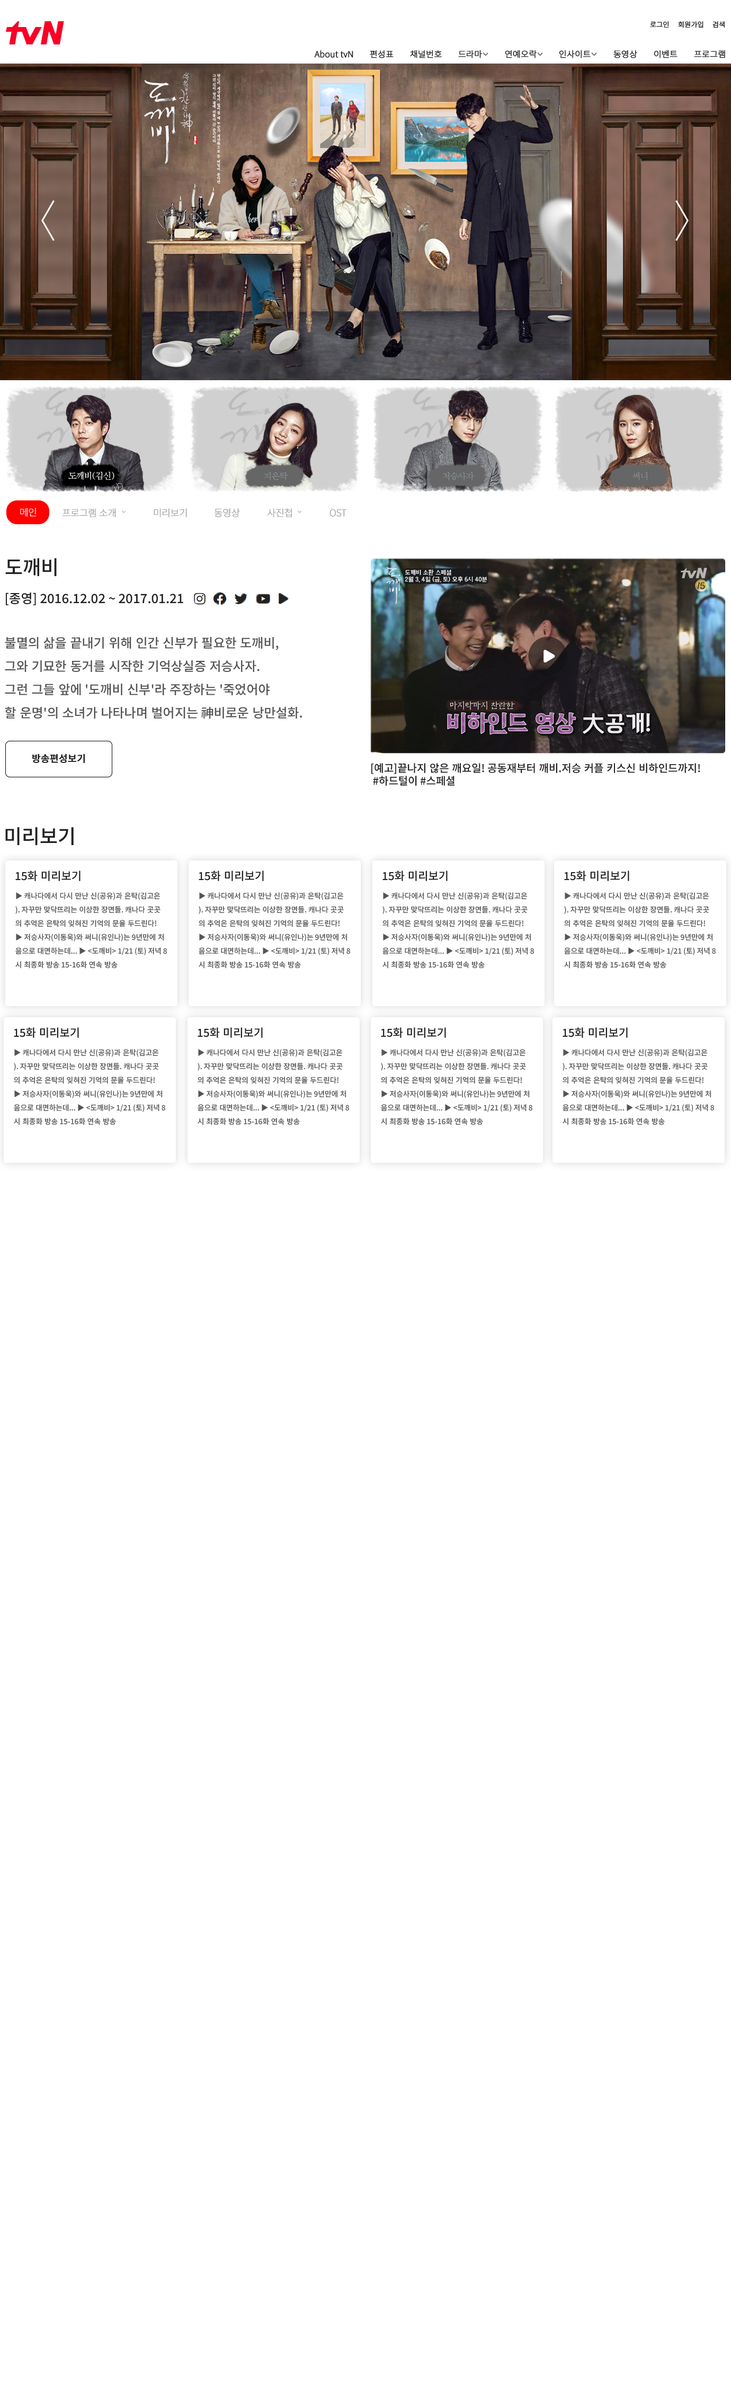
<style>
.page{position:relative;width:731px;height:2386px;background:#ffffff}
.page>*{position:absolute;margin:0}
.t1{font:6.9px "NotoSansKR-Regular";color:#222222;font-weight:bold}
.t2{font:8.5px "NotoSansKR-Regular";color:#222222;font-weight:bold}
.t3{font:9.5px "NotoSansKR-Regular";letter-spacing:-0.04em;color:#fefefe;font-weight:bold}
.t4{font:9.5px "NotoSansKR-Regular";letter-spacing:-0.04em;color:#a19f9c;font-weight:bold}
.t5{font:19.6px "NotoSansKR-Medium";color:#222222}
.t6{font:12.7px "NotoSansKR-Medium";color:#222222}
.t7{font:12.7px/23.3px "NotoSansKR-Medium";color:#555555}
.t8{font:9.5px "NotoSansKR-Regular";color:#222222;font-weight:bold}
.t9{font:10.6px "NotoSansKR-Medium";color:#222222}
.t10{font:11.1px "NotoSansKR-Medium";color:#222222}
.t11{font:7.4px/13.8px "NotoSansKR-Medium";color:#555555}
</style>
<div class="page">
<p class="t1" style="left:650px;top:21px;width:19px;height:7px">로그인</p>
<p class="t1" style="left:678px;top:21px;width:25px;height:7px">회원가입</p>
<p class="t1" style="left:712px;top:21px;width:12px;height:7px">검색</p>
<p class="t2" style="left:314px;top:50px;width:39px;height:8px">About tvN</p>
<p class="t2" style="left:370px;top:50px;width:23px;height:8px">편성표</p>
<p class="t2" style="left:410px;top:50px;width:32px;height:8px">채널번호</p>
<p class="t2" style="left:458px;top:50px;width:24px;height:8px">드라마</p>
<p class="t2" style="left:505px;top:50px;width:31px;height:8px">연예오락</p>
<p class="t2" style="left:559px;top:50px;width:31px;height:8px">인사이트</p>
<p class="t2" style="left:613px;top:50px;width:24px;height:8px">동영상</p>
<p class="t2" style="left:654px;top:50px;width:23px;height:8px">이벤트</p>
<p class="t2" style="left:694px;top:50px;width:31px;height:8px">프로그램</p>
<p class="t3" style="left:20px;top:508px;width:17px;height:9px">메인</p>
<p class="t4" style="left:62px;top:508px;width:54px;height:9px">프로그램 소개</p>
<p class="t4" style="left:154px;top:508px;width:33px;height:9px">미리보기</p>
<p class="t4" style="left:214px;top:508px;width:26px;height:9px">동영상</p>
<p class="t4" style="left:267px;top:508px;width:25px;height:9px">사진첩</p>
<p class="t4" style="left:329px;top:509px;width:18px;height:8px">OST</p>
<p class="t5" style="left:5px;top:558px;width:52px;height:18px">도깨비</p>
<p class="t6" style="left:6px;top:592px;width:177px;height:13px">[종영] 2016.12.02 ~ 2017.01.21</p>
<p class="t7" style="left:5px;top:637px;width:297px;height:81px">불멸의 삶을 끝내기 위해 인간 신부가 필요한 도깨비, <br>그와 기묘한 동거를 시작한 기억상실증 저승사자. <br>그런 그들 앞에 '도깨비 신부'라 주장하는 '죽었어야 <br>할 운명'의 소녀가 나타나며 벌어지는 神비로운 낭만설화.</p>
<p class="t8" style="left:32px;top:753px;width:53px;height:10px">방송편성보기</p>
<p class="t9" style="left:371px;top:763px;width:329px;height:23px">[예고]끝나지 않은 깨요일! 공동재부터 깨비.저승 커플 키스신 비하인드까지!<br> #하드털이 #스페셜</p>
<p class="t5" style="left:5px;top:827px;width:69px;height:18px">미리보기</p>
<p class="t10" style="left:15px;top:870px;width:65px;height:11px">15화 미리보기</p>
<p class="t10" style="left:199px;top:870px;width:65px;height:11px">15화 미리보기</p>
<p class="t10" style="left:382px;top:870px;width:65px;height:11px">15화 미리보기</p>
<p class="t10" style="left:564px;top:870px;width:65px;height:11px">15화 미리보기</p>
<p class="t11" style="left:15px;top:892px;width:152px;height:76px">▶ 캐나다에서 다시 만난 신(공유)과 은탁(김고은<br>). 자꾸만 맞닥뜨리는 이상한 장면들. 캐나다 곳곳<br>의 추억은 은탁의 잊혀진 기억의 문을 두드린다! <br>▶ 저승사자(이동욱)와 써니(유인나)는 9년만에 처<br>음으로 대면하는데... ▶ &lt;도깨비&gt; 1/21 (토) 저녁 8<br>시 최종화 방송 15-16화 연속 방송</p>
<p class="t11" style="left:199px;top:892px;width:151px;height:76px">▶ 캐나다에서 다시 만난 신(공유)과 은탁(김고은<br>). 자꾸만 맞닥뜨리는 이상한 장면들. 캐나다 곳곳<br>의 추억은 은탁의 잊혀진 기억의 문을 두드린다! <br>▶ 저승사자(이동욱)와 써니(유인나)는 9년만에 처<br>음으로 대면하는데... ▶ &lt;도깨비&gt; 1/21 (토) 저녁 8<br>시 최종화 방송 15-16화 연속 방송</p>
<p class="t11" style="left:382px;top:892px;width:152px;height:76px">▶ 캐나다에서 다시 만난 신(공유)과 은탁(김고은<br>). 자꾸만 맞닥뜨리는 이상한 장면들. 캐나다 곳곳<br>의 추억은 은탁의 잊혀진 기억의 문을 두드린다! <br>▶ 저승사자(이동욱)와 써니(유인나)는 9년만에 처<br>음으로 대면하는데... ▶ &lt;도깨비&gt; 1/21 (토) 저녁 8<br>시 최종화 방송 15-16화 연속 방송</p>
<p class="t11" style="left:564px;top:892px;width:152px;height:76px">▶ 캐나다에서 다시 만난 신(공유)과 은탁(김고은<br>). 자꾸만 맞닥뜨리는 이상한 장면들. 캐나다 곳곳<br>의 추억은 은탁의 잊혀진 기억의 문을 두드린다! <br>▶ 저승사자(이동욱)와 써니(유인나)는 9년만에 처<br>음으로 대면하는데... ▶ &lt;도깨비&gt; 1/21 (토) 저녁 8<br>시 최종화 방송 15-16화 연속 방송</p>
<p class="t10" style="left:14px;top:1027px;width:65px;height:11px">15화 미리보기</p>
<p class="t10" style="left:197px;top:1027px;width:66px;height:11px">15화 미리보기</p>
<p class="t10" style="left:381px;top:1027px;width:65px;height:11px">15화 미리보기</p>
<p class="t10" style="left:562px;top:1027px;width:65px;height:11px">15화 미리보기</p>
<p class="t11" style="left:14px;top:1049px;width:152px;height:76px">▶ 캐나다에서 다시 만난 신(공유)과 은탁(김고은<br>). 자꾸만 맞닥뜨리는 이상한 장면들. 캐나다 곳곳<br>의 추억은 은탁의 잊혀진 기억의 문을 두드린다! <br>▶ 저승사자(이동욱)와 써니(유인나)는 9년만에 처<br>음으로 대면하는데... ▶ &lt;도깨비&gt; 1/21 (토) 저녁 8<br>시 최종화 방송 15-16화 연속 방송</p>
<p class="t11" style="left:197px;top:1049px;width:152px;height:76px">▶ 캐나다에서 다시 만난 신(공유)과 은탁(김고은<br>). 자꾸만 맞닥뜨리는 이상한 장면들. 캐나다 곳곳<br>의 추억은 은탁의 잊혀진 기억의 문을 두드린다! <br>▶ 저승사자(이동욱)와 써니(유인나)는 9년만에 처<br>음으로 대면하는데... ▶ &lt;도깨비&gt; 1/21 (토) 저녁 8<br>시 최종화 방송 15-16화 연속 방송</p>
<p class="t11" style="left:381px;top:1049px;width:152px;height:76px">▶ 캐나다에서 다시 만난 신(공유)과 은탁(김고은<br>). 자꾸만 맞닥뜨리는 이상한 장면들. 캐나다 곳곳<br>의 추억은 은탁의 잊혀진 기억의 문을 두드린다! <br>▶ 저승사자(이동욱)와 써니(유인나)는 9년만에 처<br>음으로 대면하는데... ▶ &lt;도깨비&gt; 1/21 (토) 저녁 8<br>시 최종화 방송 15-16화 연속 방송</p>
<p class="t11" style="left:562px;top:1049px;width:152px;height:76px">▶ 캐나다에서 다시 만난 신(공유)과 은탁(김고은<br>). 자꾸만 맞닥뜨리는 이상한 장면들. 캐나다 곳곳<br>의 추억은 은탁의 잊혀진 기억의 문을 두드린다! <br>▶ 저승사자(이동욱)와 써니(유인나)는 9년만에 처<br>음으로 대면하는데... ▶ &lt;도깨비&gt; 1/21 (토) 저녁 8<br>시 최종화 방송 15-16화 연속 방송</p>
</div>
